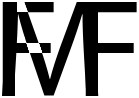
<style>
.page{position:relative;width:139px;height:98px;background:#ffffff}
.page>*{position:absolute;margin:0}
.t1{font:140px "MyriadPro-Regular";color:#000000}
</style>
<div class="page">
<p class="t1" style="left:2px;top:2px;width:52px;height:94px">F</p>
<p class="t1" style="left:2px;top:2px;width:97px;height:94px">M</p>
<p class="t1" style="left:85px;top:2px;width:52px;height:94px">F</p>
</div>
